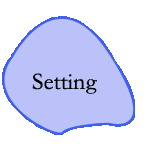
<style>
.page{position:relative;width:144px;height:144px;background:#bbc1f9}
.page>*{position:absolute;margin:0}
.t1{font:24px "STFangsong";color:#020200}
</style>
<div class="page">
<p class="t1" style="left:32px;top:73px;width:65px;height:21px">Setting</p>
</div>
